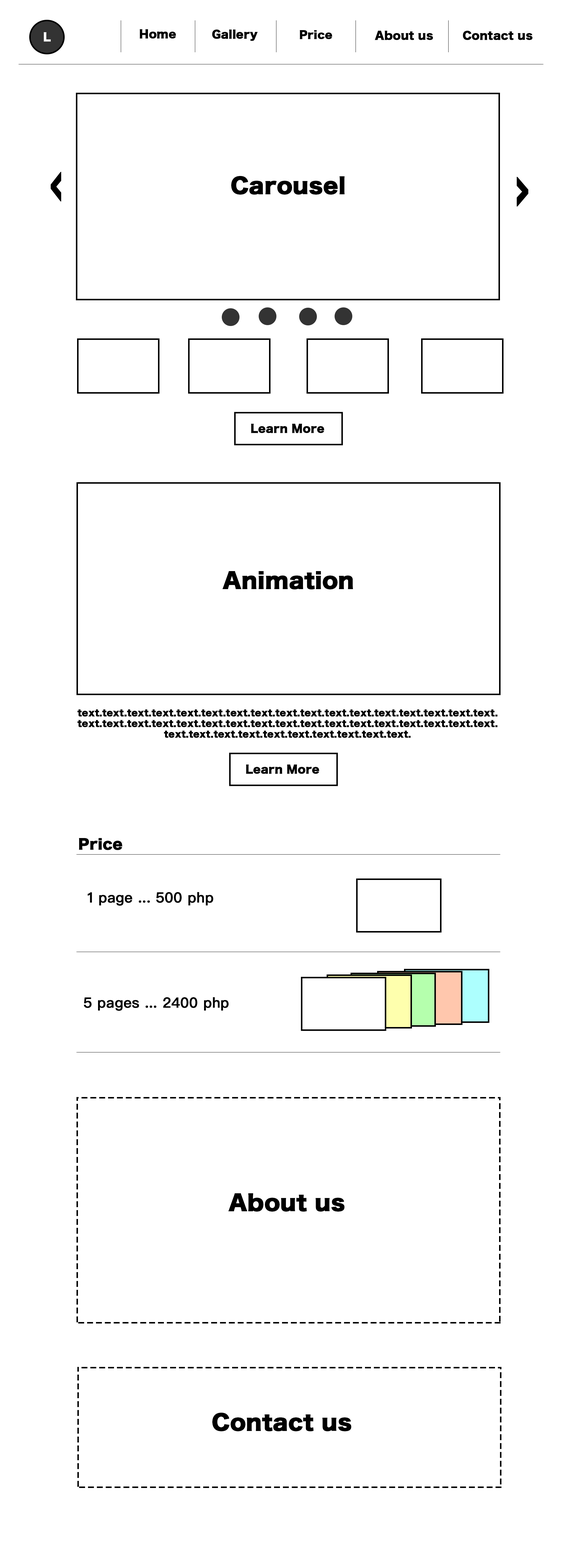
<style>
.page{position:relative;width:567px;height:1568px;background:#ffffff}
.page>*{position:absolute;margin:0}
.t1{font:10.6px "HiraKakuStd-W8";color:#000000;font-weight:bold}
.t2{font:10.6px "HiraKakuStd-W8";color:#ffffff;font-weight:bold}
.t3{font:10.2px "HiraKakuStd-W8";color:#000000;font-weight:bold;scale:1.04 1}
.t4{font:44.9px "HiraKakuStd-W8";color:#000000;font-weight:bold;scale:0.43 1}
.t5{font:21.3px "HiraKakuStd-W8";color:#000000;font-weight:bold}
.t6{font:44.9px "HiraKakuStd-W8";color:#000000;font-weight:bold;scale:0.47 1}
.t7{font:8.9px "HiraKakuStd-W8";color:#000000;font-weight:bold}
.t8{font:14.2px "HiraKakuStd-W8";color:#000000;font-weight:bold}
.t9{font:14.2px "PingFangSC-Medium";color:#000000;font-weight:bold}
</style>
<div class="page">
<p class="t1" style="left:140px;top:29px;width:36px;height:10px">Home</p>
<p class="t1" style="left:212px;top:30px;width:46px;height:11px">Gallery</p>
<p class="t2" style="left:44px;top:32px;width:7px;height:10px">L</p>
<p class="t3" style="left:300px;top:30px;width:32px;height:9px">Price</p>
<p class="t1" style="left:375px;top:31px;width:58px;height:9px">About us</p>
<p class="t1" style="left:463px;top:31px;width:69px;height:9px">Contact us</p>
<p class="t4" style="left:50px;top:172px;width:11px;height:30px;rotate:180deg">&gt;</p>
<p class="t5" style="left:231px;top:176px;width:114px;height:19px">Carousel</p>
<p class="t6" style="left:516px;top:177px;width:12px;height:30px">&gt;</p>
<p class="t1" style="left:251px;top:424px;width:73px;height:9px">Learn More</p>
<p class="t5" style="left:222px;top:571px;width:131px;height:18px">Animation</p>
<p class="t7" style="left:77px;top:709px;width:421px;height:29px;text-align:center">text.text.text.text.text.text.text.text.text.text.text.text.text.text.text.text.text.text.text.text.text.text.text.text.text.text.text.text.text.text.text.text.text.text.text.text.text.text.text.text.text.text.text.text.</p>
<p class="t1" style="left:246px;top:765px;width:73px;height:9px">Learn More</p>
<p class="t8" style="left:79px;top:838px;width:43px;height:12px">Price</p>
<p class="t9" style="left:88px;top:892px;width:125px;height:14px">1 page ... 500 php</p>
<p class="t9" style="left:84px;top:997px;width:145px;height:14px">5 pages ... 2400 php</p>
<p class="t5" style="left:228px;top:1193px;width:117px;height:19px">About us</p>
<p class="t5" style="left:212px;top:1413px;width:139px;height:18px">Contact us</p>
</div>
